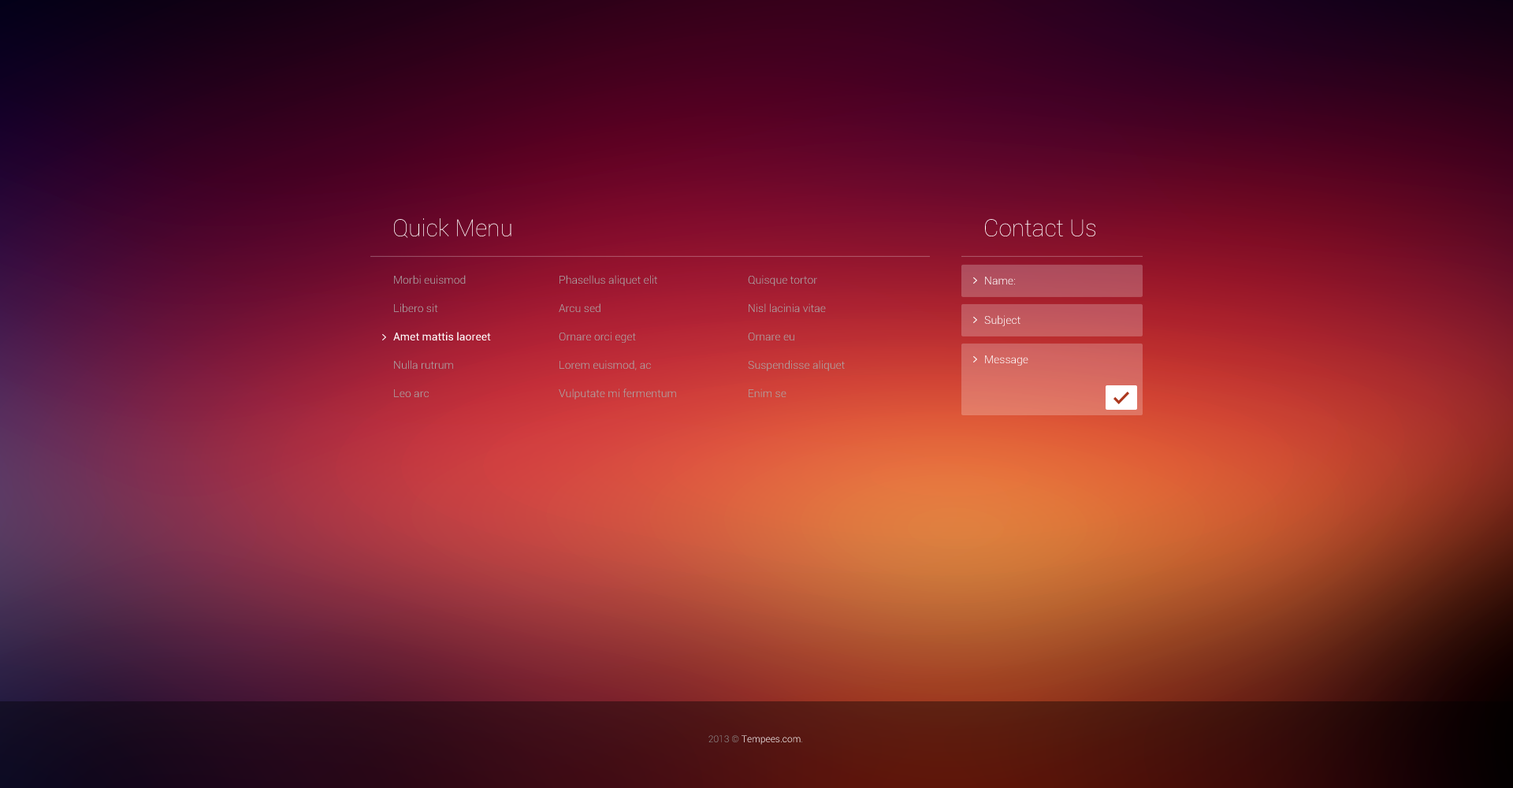
<style>
.page{position:relative;width:1513px;height:788px}
.page>*{position:absolute;margin:0}
.t1{font:23.7px "Roboto-Thin";color:#ffffff}
.t2{font:11px/28.4px "Roboto-Light";color:#ababab}
.t3{font:11px/28.4px "Roboto-Regular";color:#ffffff}
.t4{font:11px "Roboto-Light";color:#ffffff}
.t5{font:11px "Roboto-Light"}
.t6{font:9.5px "Roboto-Light"}
</style>
<div class="page">
<p class="t1" style="left:394px;top:218px;width:117px;height:20px">Quick Menu</p>
<p class="t1" style="left:985px;top:219px;width:110px;height:17px">Contact Us</p>
<p class="t2" style="left:393px;top:275px;width:98px;height:123px">Morbi euismod<br>Libero sit<br><span class="t3">Amet mattis laoreet<br></span>Nulla rutrum<br>Leo arc</p>
<p class="t2" style="left:559px;top:275px;width:117px;height:125px">Phasellus aliquet elit<br>Arcu sed<br>Ornare orci eget<br>Lorem euismod, ac<br>Vulputate mi fermentum</p>
<p class="t2" style="left:748px;top:275px;width:97px;height:122px">Quisque tortor<br>Nisl lacinia vitae<br>Ornare eu<br>Suspendisse aliquet<br>Enim se</p>
<p class="t4" style="left:985px;top:277px;width:30px;height:8px">Name:</p>
<p class="t5" style="left:984px;top:315px;width:37px;height:11px">Subject</p>
<p class="t4" style="left:985px;top:355px;width:43px;height:11px">Message</p>
<p class="t6" style="left:708px;top:735px;width:94px;height:10px">2013 © Tempees.com.</p>
</div>
